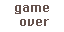
<style>
.page{position:relative;width:64px;height:32px;background:#ffffff}
.page>*{position:absolute;margin:0}
.t1{font:11.6px "ChicagoFLF";color:#65524d}
</style>
<div class="page">
<p class="t1" style="left:15px;top:5px;width:34px;height:21px;text-align:center">game <br>over</p>
</div>
